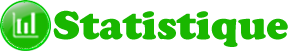
<style>
.page{position:relative;width:288px;height:51px;background:#ffffff}
.page>*{position:absolute;margin:0}
.t1{font:41.7px "CooperBlack";color:#1ab700}
</style>
<div class="page">
<p class="t1" style="left:53px;top:10px;width:235px;height:37px">Statistique</p>
</div>
